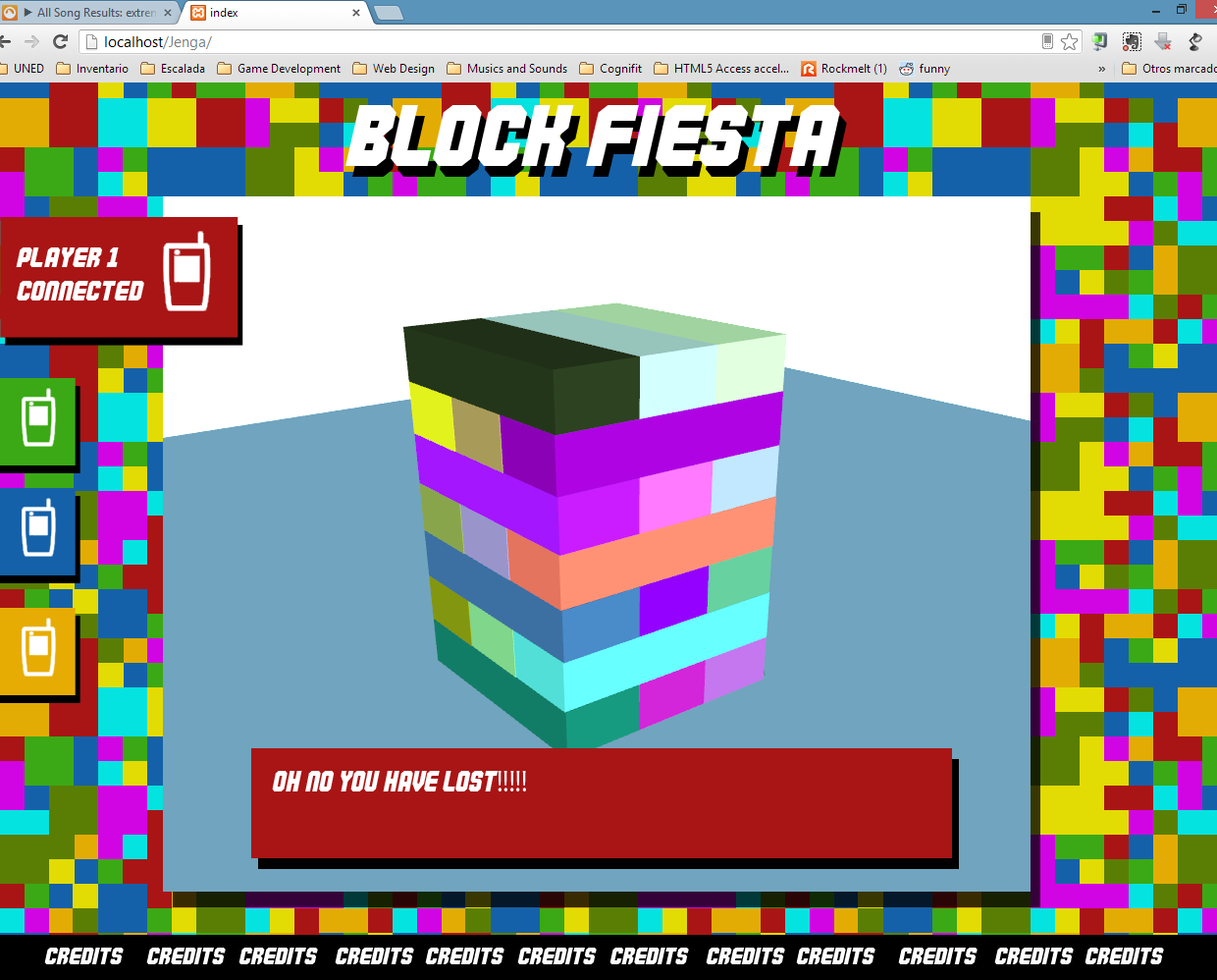
<style>
.page{position:relative;width:1217px;height:980px}
.page>*{position:absolute;margin:0}
.t1{font:87.8px "Commando";color:#ffffff}
.t2{font:27.5px "Commando";color:#ffffff}
.t3{font:29.4px "Commando";color:#ffffff;scale:0.9 1}
.t4{font:29.4px "MyriadPro-Regular";color:#ffffff;scale:0.9 1}
.t5{font:23.6px "Commando";color:#ffffff}
</style>
<div class="page">
<p class="t1" style="left:346px;top:105px;width:494px;height:61px">block FIESTA</p>
<p class="t2" style="left:16px;top:247px;width:128px;height:53px">PLAYER 1<br>connected</p>
<p class="t3" style="left:272px;top:771px;width:254px;height:20px">Oh no you have lost<span class="t4">!!!!!</span></p>
<p class="t5" style="left:44px;top:947px;width:80px;height:17px">credits</p>
<p class="t5" style="left:146px;top:947px;width:80px;height:17px">credits</p>
<p class="t5" style="left:239px;top:947px;width:79px;height:17px">credits</p>
<p class="t5" style="left:335px;top:947px;width:79px;height:17px">credits</p>
<p class="t5" style="left:425px;top:947px;width:80px;height:17px">credits</p>
<p class="t5" style="left:517px;top:947px;width:80px;height:17px">credits</p>
<p class="t5" style="left:610px;top:947px;width:79px;height:17px">credits</p>
<p class="t5" style="left:706px;top:947px;width:79px;height:17px">credits</p>
<p class="t5" style="left:796px;top:947px;width:80px;height:17px">credits</p>
<p class="t5" style="left:898px;top:947px;width:80px;height:17px">credits</p>
<p class="t5" style="left:994px;top:947px;width:80px;height:17px">credits</p>
<p class="t5" style="left:1085px;top:947px;width:79px;height:17px">credits</p>
</div>
